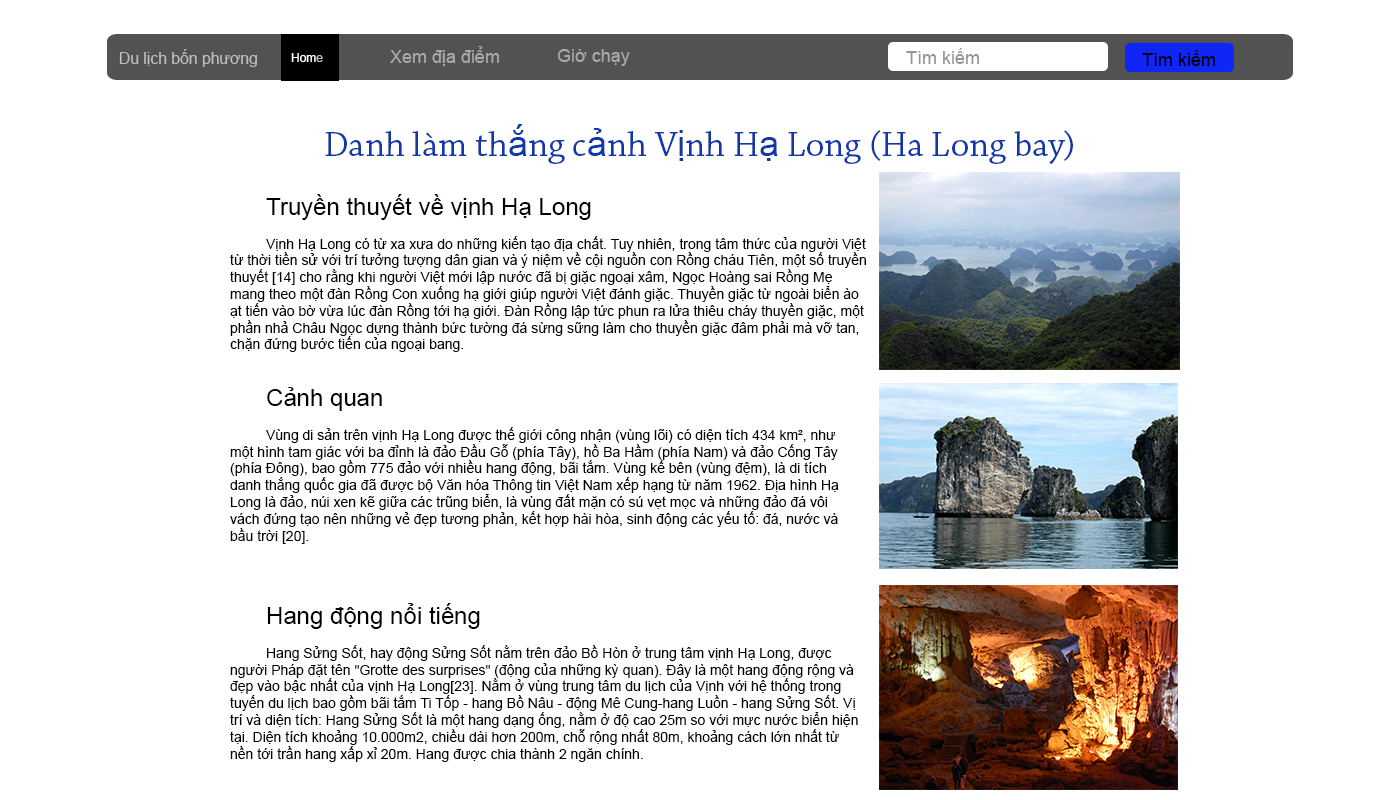
<style>
.page{position:relative;width:1400px;height:800px;background:#ffffff}
.page>*{position:absolute;margin:0}
.t1{font:15.7px "ArialMT";color:#bdbdbd}
.t2{font:12px "ArialMT";color:#ffffff}
.t3{font:12px "ArialMT";color:#bdbdbd}
.t4{font:18px "ArialMT";color:#a9a9a9}
.t5{font:18px "ArialMT";color:#949494}
.t6{font:18px "ArialMT";color:#000000}
.t7{font:36px "ChaparralPro-Regular";color:#1138a9}
.t8{font:36px "ArialMT";color:#1138a9}
.t9{font:14px "ArialMT";color:#000000}
.t10{font:24px "ArialMT";color:#000000}
</style>
<div class="page">
<p class="t1" style="left:119px;top:49px;width:138px;height:18px">Du lịch bốn phương</p>
<p class="t2" style="left:291px;top:53px;width:32px;height:9px">Hom<span class="t3">e</span></p>
<p class="t4" style="left:390px;top:46px;width:109px;height:20px">Xem địa điểm</p>
<p class="t4" style="left:557px;top:49px;width:73px;height:17px">Giờ chạy</p>
<p class="t5" style="left:906px;top:48px;width:73px;height:16px">Tìm kiếm</p>
<p class="t6" style="left:1142px;top:50px;width:73px;height:16px">Tìm kiếm</p>
<p class="t7" style="left:325px;top:124px;width:748px;height:40px">Danh làm th<span class="t8">ắ</span>ng c<span class="t8">ả</span>nh V<span class="t8">ị</span>nh H<span class="t8">ạ</span> Long (Ha Long bay)</p>
<p class="t9" style="left:230px;top:194px;width:636px;height:158px"><span class="t10">Truyền thuyết về vịnh Hạ Long<br></span><br> Vịnh Hạ Long có từ xa xưa do những kiến tạo địa chất. Tuy nhiên, trong tâm thức của người Việt từ thời tiền sử với trí tưởng tượng dân gian và ý niệm về cội nguồn con Rồng cháu Tiên, một số truyền thuyết [14] cho rằng khi người Việt mới lập nước đã bị giặc ngoại xâm, Ngọc Hoàng sai Rồng Mẹ mang theo một đàn Rồng Con xuống hạ giới giúp người Việt đánh giặc. Thuyền giặc từ ngoài biển ào ạt tiến vào bờ vừa lúc đàn Rồng tới hạ giới. Đàn Rồng lập tức phun ra lửa thiêu cháy thuyền giặc, một phần nhả Châu Ngọc dựng thành bức tường đá sừng sững làm cho thuyền giặc đâm phải mà vỡ tan, chặn đứng bước tiến của ngoại bang.</p>
<p class="t9" style="left:230px;top:387px;width:609px;height:157px"><span class="t10">Cảnh quan<br></span><br> Vùng di sản trên vịnh Hạ Long được thế giới công nhận (vùng lõi) có diện tích 434 km², như một hình tam giác với ba đỉnh là đảo Đầu Gỗ (phía Tây), hồ Ba Hầm (phía Nam) và đảo Cống Tây (phía Đông), bao gồm 775 đảo với nhiều hang động, bãi tắm. Vùng kế bên (vùng đệm), là di tích danh thắng quốc gia đã được bộ Văn hóa Thông tin Việt Nam xếp hạng từ năm 1962. Địa hình Hạ Long là đảo, núi xen kẽ giữa các trũng biển, là vùng đất mặn có sú vẹt mọc và những đảo đá vôi vách đứng tạo nên những vẻ đẹp tương phản, kết hợp hài hòa, sinh động các yếu tố: đá, nước và bầu trời [20].</p>
<p class="t9" style="left:230px;top:603px;width:628px;height:159px"><span class="t10"> <br> Hang động nổi tiếng<br></span><br> Hang Sửng Sốt, hay động Sửng Sốt nằm trên đảo Bồ Hòn ở trung tâm vịnh Hạ Long, được người Pháp đặt tên "Grotte des surprises" (động của những kỳ quan). Ðây là một hang động rộng và đẹp vào bậc nhất của vịnh Hạ Long[23]. Nằm ở vùng trung tâm du lịch của Vịnh với hệ thống trong tuyến du lịch bao gồm bãi tắm Ti Tốp - hang Bồ Nâu - động Mê Cung-hang Luồn - hang Sửng Sốt. Vị trí và diện tích: Hang Sửng Sốt là một hang dạng ống, nằm ở độ cao 25m so với mực nước biển hiện tại. Diện tích khoảng 10.000m2, chiều dài hơn 200m, chỗ rộng nhất 80m, khoảng cách lớn nhất từ nền tới trần hang xấp xỉ 20m. Hang được chia thành 2 ngăn chính.</p>
</div>
